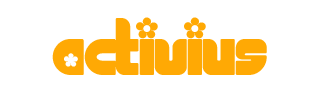
<style>
.page{position:relative;width:320px;height:100px;background:#ffffff}
.page>*{position:absolute;margin:0}
.t1{font:72px "Chick";color:#ffa904}
</style>
<div class="page">
<p class="t1" style="left:52px;top:17px;width:215px;height:58px">activius</p>
</div>
